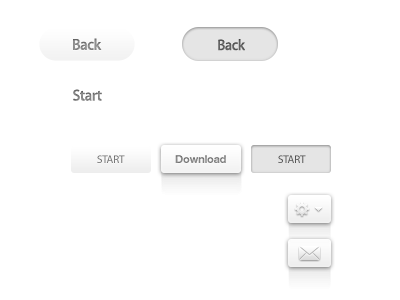
<style>
.page{position:relative;width:400px;height:300px;background:#ffffff}
.page>*{position:absolute;margin:0}
.t1{font:14px "AdobeHeitiStd-Regular";letter-spacing:-0.02em;color:#8c8c8c}
.t2{font:13.5px "AdobeHeitiStd-Regular";letter-spacing:-0.02em;color:#606060}
.t3{font:14px "AdobeHeitiStd-Regular";letter-spacing:-0.02em;color:#818181}
.t4{font:11px "MyriadPro-Regular";letter-spacing:-0.02em;color:#787878}
.t5{font:11px "HelveticaNeueLTCom-Bd";letter-spacing:-0.02em;color:#848484}
.t6{font:11px "MyriadPro-Regular";letter-spacing:-0.02em;color:#565656}
</style>
<div class="page">
<p class="t1" style="left:73px;top:38px;width:29px;height:12px">Back</p>
<p class="t2" style="left:218px;top:39px;width:27px;height:12px">Back</p>
<p class="t3" style="left:73px;top:89px;width:29px;height:12px">Start</p>
<p class="t4" style="left:97px;top:155px;width:28px;height:8px">START</p>
<p class="t5" style="left:175px;top:155px;width:51px;height:8px">Download</p>
<p class="t6" style="left:278px;top:155px;width:28px;height:8px">START</p>
</div>
